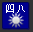
<style>
.page{position:relative;width:33px;height:32px;background:#000090}
.page>*{position:absolute;margin:0}
.t1{font:10.4px "SimSun";color:#ffffff}
</style>
<div class="page">
<p class="t1" style="left:6px;top:4px;width:19px;height:9px">四八</p>
</div>
